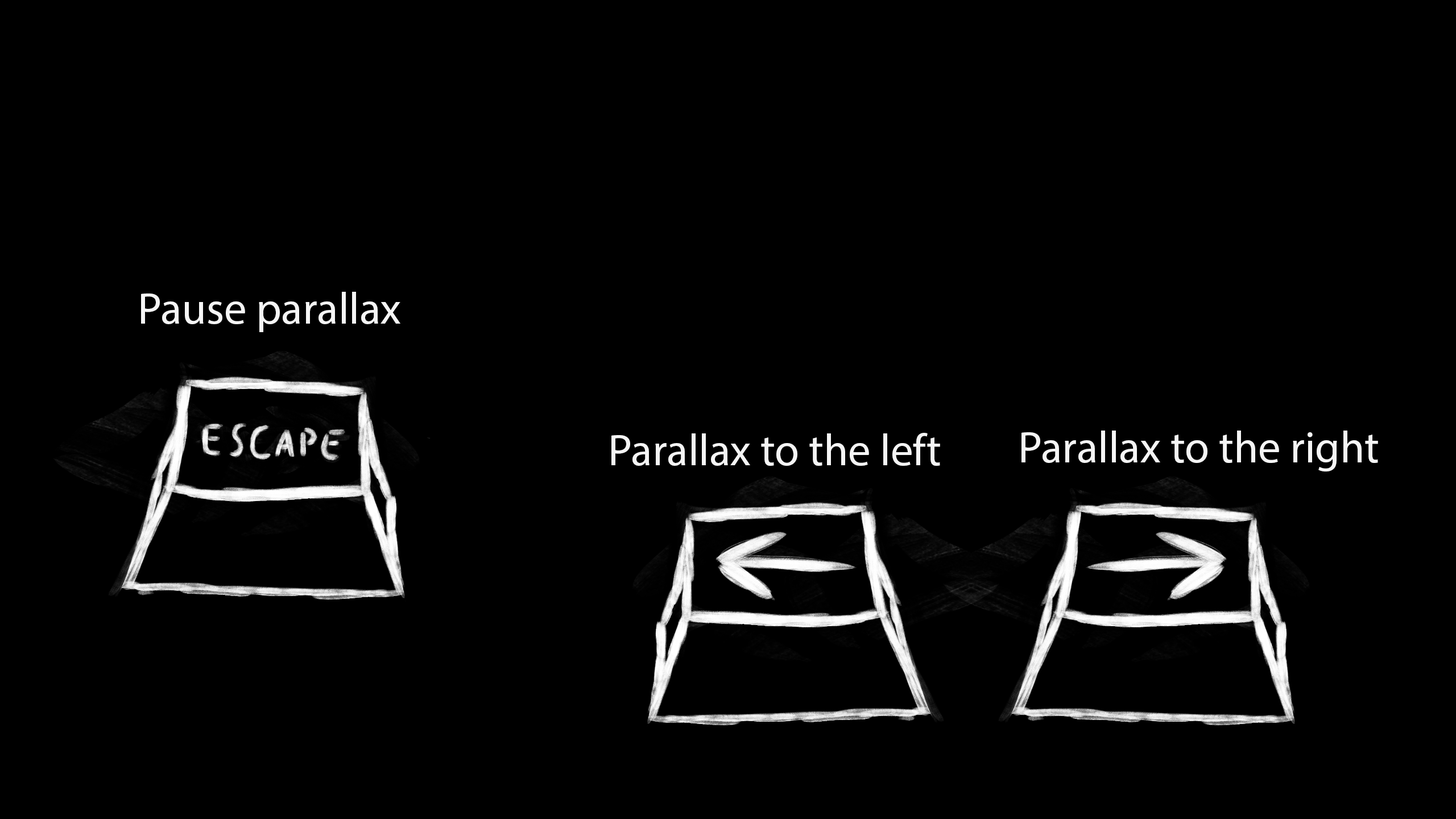
<style>
.page{position:relative;width:1456px;height:819px;background:#000000}
.page>*{position:absolute;margin:0}
.t1{font:44.5px "MyriadPro-Regular";color:#f5f5f5}
</style>
<div class="page">
<p class="t1" style="left:141px;top:292px;width:259px;height:40px">Pause parallax</p>
<p class="t1" style="left:611px;top:433px;width:329px;height:33px">Parallax to the left</p>
<p class="t1" style="left:1021px;top:431px;width:357px;height:40px">Parallax to the right</p>
</div>
